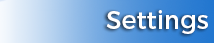
<style>
.page{position:relative;width:214px;height:43px}
.page>*{position:absolute;margin:0}
.t1{font:25px "Montserrat-Regular";color:#ffffff}
</style>
<div class="page">
<p class="t1" style="left:106px;top:10px;width:102px;height:24px">Settings</p>
</div>
